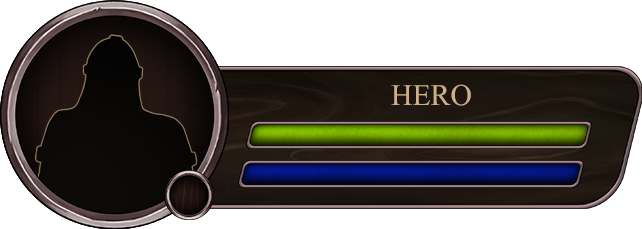
<style>
.page{position:relative;width:642px;height:229px;background:#ffffff}
.page>*{position:absolute;margin:0}
.t1{font:30px "MongolianBaiti";color:#cdb087}
</style>
<div class="page">
<p class="t1" style="left:391px;top:84px;width:80px;height:22px">HERO</p>
</div>
